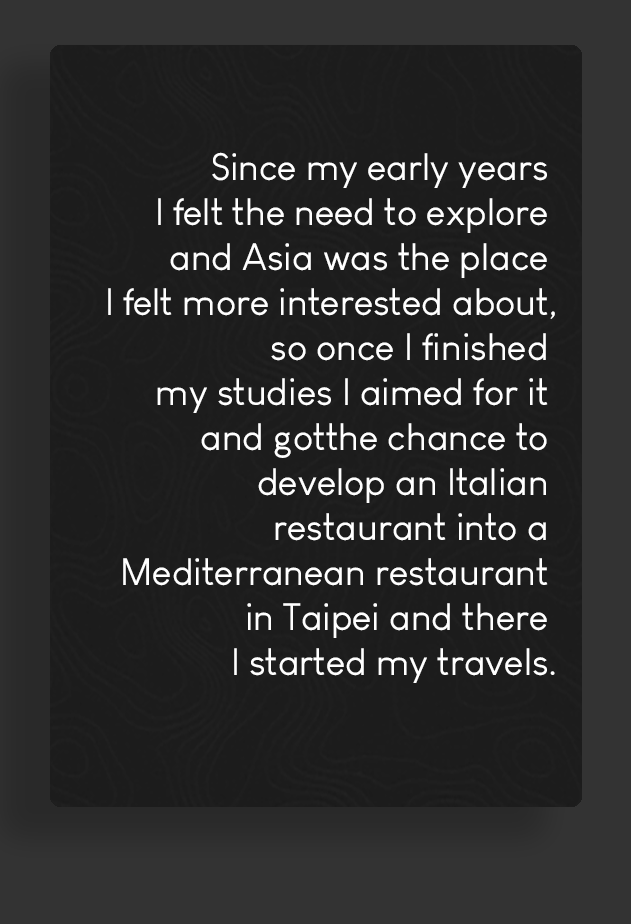
<style>
.page{position:relative;width:631px;height:924px;background:#1c1c1c}
.page>*{position:absolute;margin:0}
.t1{font:37.5px "LouisGeorgeCafe";color:#ffffff}
</style>
<div class="page">
<p class="t1" style="left:108px;top:152px;width:447px;height:531px;text-align:right">Since my early years <br>I felt the need to explore <br>and Asia was the place <br>I felt more interested about,<br>so once I finished <br>my studies I aimed for it <br> and gotthe chance to <br>develop an Italian <br>restaurant into a <br>Mediterranean restaurant <br> in Taipei and there <br>I started my travels.</p>
</div>
